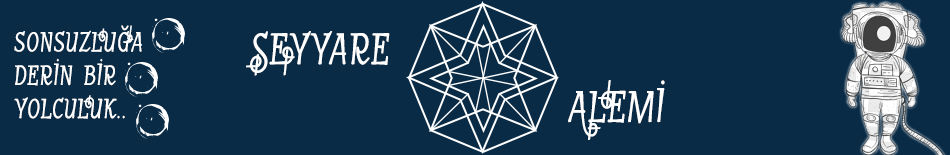
<style>
.page{position:relative;width:950px;height:155px;background:#092b46}
.page>*{position:absolute;margin:0}
.t1{font:37.5px/33.3px "GarineldoSC";letter-spacing:0.025em;color:#ffffff;font-weight:bold;scale:0.78 1}
.t2{font:60px "GarineldoSC";letter-spacing:0.025em;color:#ffffff;font-weight:bold;scale:0.78 1}
</style>
<div class="page">
<p class="t1" style="left:14px;top:25px;width:128px;height:94px">sonsuzluğa<br>derİn bİr<br>yolculuk..</p>
<p class="t2" style="left:246px;top:31px;width:144px;height:45px">seyyare</p>
<p class="t2" style="left:568px;top:80px;width:97px;height:60px">alemİ</p>
</div>
